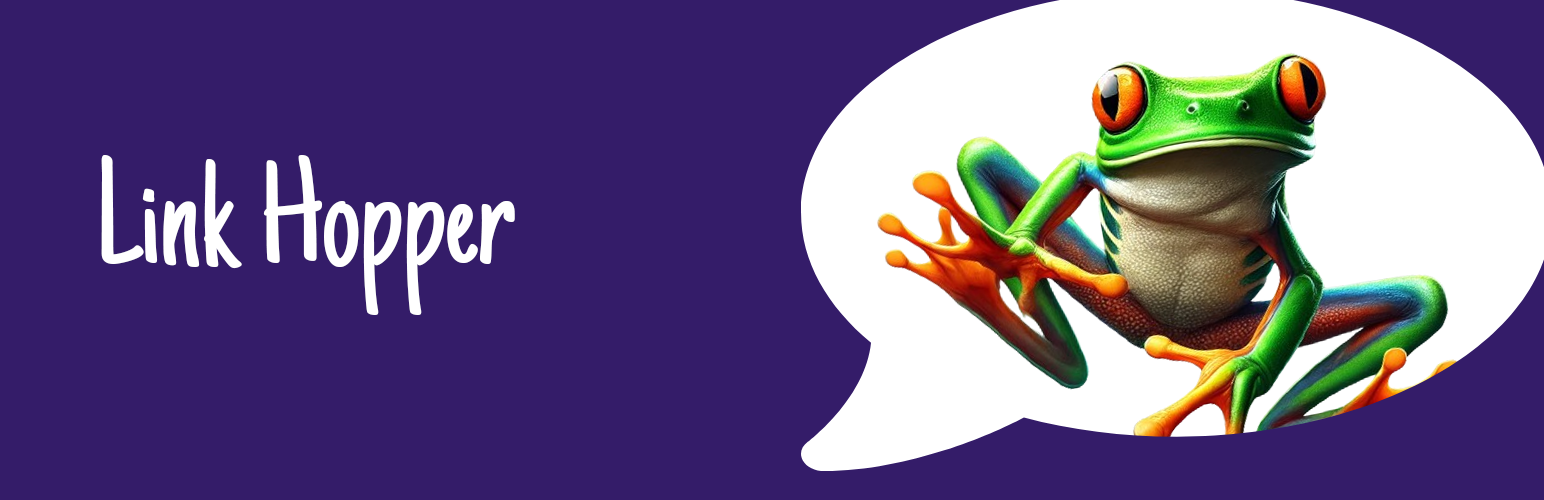
<style>
.page{position:relative;width:1544px;height:500px;background:#341c69}
.page>*{position:absolute;margin:0}
.t1{font:153.8px "JustAnotherHand-Regular";color:#ffffff}
</style>
<div class="page">
<p class="t1" style="left:101px;top:155px;width:414px;height:160px">Link Hopper</p>
</div>
